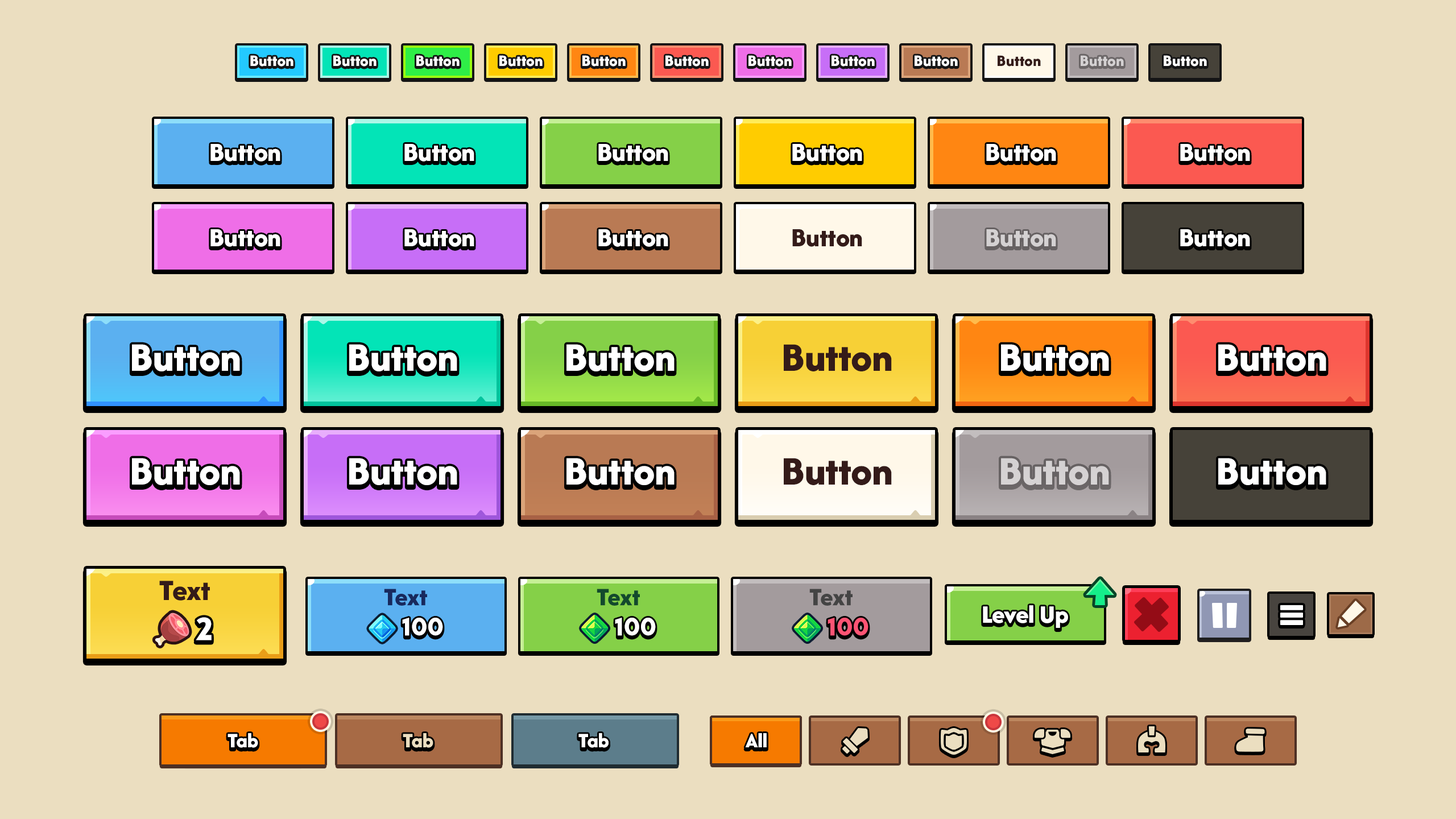
<style>
.page{position:relative;width:1456px;height:819px;background:#ebdec0}
.page>*{position:absolute;margin:0}
.t1{font:16.5px "AfacadFlux-ExtraBold";color:#ffffff}
.t2{font:16.5px "AfacadFlux-ExtraBold";color:#341b19}
.t3{font:16.5px "AfacadFlux-ExtraBold";color:#d4d1d2}
.t4{font:27.3px "AfacadFlux-ExtraBold";color:#ffffff}
.t5{font:27.3px "AfacadFlux-ExtraBold";color:#341b19}
.t6{font:27.3px "AfacadFlux-ExtraBold";color:#d4d1d2}
.t7{font:42.1px "AfacadFlux-ExtraBold";color:#ffffff}
.t8{font:42.1px "AfacadFlux-ExtraBold";color:#341b19}
.t9{font:42.1px "AfacadFlux-ExtraBold";color:#d5d2d3}
.t10{font:30.7px "AfacadFlux-ExtraBold";color:#341b19}
.t11{font:26.2px "AfacadFlux-ExtraBold";color:#18295d}
.t12{font:26.2px "AfacadFlux-ExtraBold";color:#134a2d}
.t13{font:26.2px "AfacadFlux-ExtraBold";color:#444444}
.t14{font:26.2px "AfacadFlux-ExtraBold";color:#ffffff}
.t15{font:33px "LTAvocado-Bold";color:#ffffff}
.t16{font:26.2px "LTAvocado-Bold";color:#ffffff}
.t17{font:26.2px "LTAvocado-Bold";color:#ff5474}
.t18{font:21.3px "AfacadFlux-ExtraBold";color:#ffffff}
.t19{font:21.3px "AfacadFlux-ExtraBold";color:#ebdec0}
</style>
<div class="page">
<p class="t1" style="left:250px;top:55px;width:43px;height:12px">Button</p>
<p class="t1" style="left:333px;top:55px;width:44px;height:12px">Button</p>
<p class="t1" style="left:416px;top:55px;width:44px;height:12px">Button</p>
<p class="t1" style="left:499px;top:55px;width:44px;height:12px">Button</p>
<p class="t1" style="left:582px;top:55px;width:44px;height:12px">Button</p>
<p class="t1" style="left:665px;top:55px;width:44px;height:12px">Button</p>
<p class="t1" style="left:748px;top:55px;width:44px;height:12px">Button</p>
<p class="t1" style="left:832px;top:55px;width:43px;height:12px">Button</p>
<p class="t1" style="left:915px;top:55px;width:43px;height:12px">Button</p>
<p class="t2" style="left:998px;top:55px;width:43px;height:12px">Button</p>
<p class="t3" style="left:1081px;top:55px;width:43px;height:12px">Button</p>
<p class="t1" style="left:1164px;top:55px;width:43px;height:12px">Button</p>
<p class="t4" style="left:210px;top:144px;width:70px;height:18px">Button</p>
<p class="t4" style="left:404px;top:144px;width:70px;height:18px">Button</p>
<p class="t4" style="left:598px;top:144px;width:70px;height:18px">Button</p>
<p class="t4" style="left:792px;top:144px;width:70px;height:18px">Button</p>
<p class="t4" style="left:986px;top:144px;width:70px;height:18px">Button</p>
<p class="t4" style="left:1180px;top:144px;width:70px;height:18px">Button</p>
<p class="t4" style="left:210px;top:229px;width:70px;height:18px">Button</p>
<p class="t4" style="left:404px;top:229px;width:70px;height:18px">Button</p>
<p class="t4" style="left:598px;top:229px;width:70px;height:18px">Button</p>
<p class="t5" style="left:792px;top:229px;width:70px;height:18px">Button</p>
<p class="t6" style="left:986px;top:229px;width:70px;height:18px">Button</p>
<p class="t4" style="left:1180px;top:229px;width:70px;height:18px">Button</p>
<p class="t7" style="left:132px;top:344px;width:108px;height:27px">Button</p>
<p class="t7" style="left:349px;top:344px;width:108px;height:27px">Button</p>
<p class="t7" style="left:566px;top:344px;width:109px;height:27px">Button</p>
<p class="t8" style="left:784px;top:344px;width:108px;height:27px">Button</p>
<p class="t7" style="left:1001px;top:344px;width:108px;height:27px">Button</p>
<p class="t7" style="left:1218px;top:344px;width:108px;height:27px">Button</p>
<p class="t7" style="left:132px;top:458px;width:108px;height:27px">Button</p>
<p class="t7" style="left:349px;top:458px;width:108px;height:27px">Button</p>
<p class="t7" style="left:566px;top:458px;width:109px;height:27px">Button</p>
<p class="t8" style="left:784px;top:458px;width:108px;height:27px">Button</p>
<p class="t9" style="left:1001px;top:458px;width:108px;height:27px">Button</p>
<p class="t7" style="left:1218px;top:458px;width:108px;height:27px">Button</p>
<p class="t10" style="left:159px;top:581px;width:51px;height:20px">Text</p>
<p class="t11" style="left:384px;top:589px;width:43px;height:17px">Text</p>
<p class="t12" style="left:597px;top:589px;width:43px;height:17px">Text</p>
<p class="t13" style="left:809px;top:589px;width:44px;height:17px">Text</p>
<p class="t14" style="left:983px;top:605px;width:85px;height:23px">Level Up</p>
<p class="t15" style="left:196px;top:617px;width:16px;height:23px">2</p>
<p class="t16" style="left:402px;top:618px;width:41px;height:18px">100</p>
<p class="t16" style="left:615px;top:618px;width:41px;height:18px">100</p>
<p class="t17" style="left:828px;top:618px;width:40px;height:18px">100</p>
<p class="t18" style="left:227px;top:733px;width:31px;height:15px">Tab</p>
<p class="t19" style="left:403px;top:733px;width:30px;height:15px">Tab</p>
<p class="t18" style="left:578px;top:733px;width:31px;height:15px">Tab</p>
<p class="t18" style="left:745px;top:733px;width:22px;height:14px">All</p>
<p class="t18" style="left:745px;top:733px;width:22px;height:14px">All</p>
</div>
